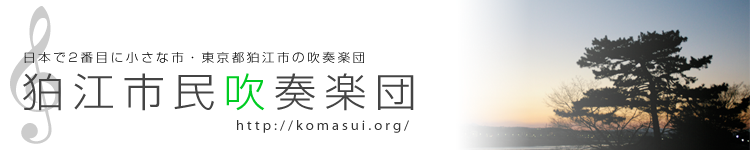
<style>
.page{position:relative;width:750px;height:150px;background:#ffffff}
.page>*{position:absolute;margin:0}
.t1{font:79.6px "Toccata";letter-spacing:0.2em;color:#cccccc;scale:1.05 1}
.t2{font:12px "ShinGoPro-Light";letter-spacing:0.2em;color:#000000;scale:1.05 1}
.t3{font:40px "ShinGoPro-Light";letter-spacing:0.2em;color:#444444;scale:1.05 1}
.t4{font:40px "ShinGoPro-Light";letter-spacing:0.2em;color:#00cc22;scale:1.05 1}
.t5{font:14px "MyriadPro-Regular";letter-spacing:0.2em;color:#333333;scale:1.05 1}
</style>
<div class="page">
<p class="t1" style="left:10px;top:6px;width:51px;height:138px">&amp;</p>
<p class="t2" style="left:24px;top:51px;width:340px;height:12px">日本で2番目に小さな市・東京都狛江市の吹奏楽団</p>
<p class="t3" style="left:23px;top:73px;width:391px;height:38px">狛江市民<span class="t4">吹</span>奏楽団</p>
<p class="t5" style="left:237px;top:120px;width:172px;height:13px">http://komasui.org/</p>
</div>
